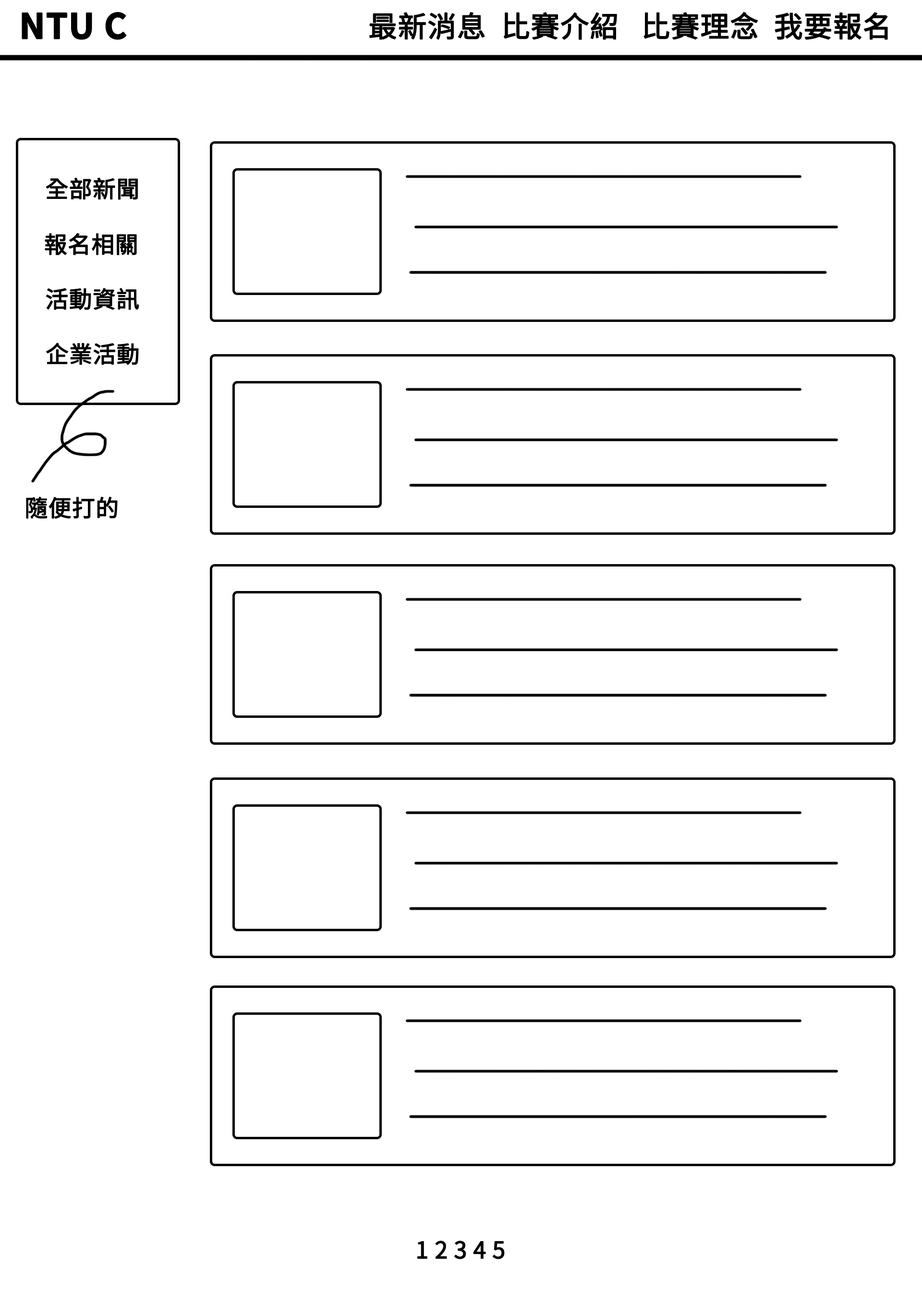
<style>
.page{position:relative;width:922px;height:1293px;background:#ffffff}
.page>*{position:absolute;margin:0}
.t1{font:34.6px "NotoSansCJKtc-Bold";color:#000000;font-weight:bold}
.t2{font:28.8px "NotoSansCJKtc-Regular";color:#000000;font-weight:bold}
.t3{font:23.1px "NotoSansCJKtc-Regular";color:#000000;font-weight:bold}
</style>
<div class="page">
<p class="t1" style="left:22px;top:12px;width:105px;height:28px">NTU C</p>
<p class="t2" style="left:369px;top:12px;width:519px;height:28px">最新消息  比賽介紹   比賽理念  我要報名</p>
<p class="t3" style="left:46px;top:177px;width:92px;height:23px">全部新聞</p>
<p class="t3" style="left:45px;top:233px;width:92px;height:23px">報名相關</p>
<p class="t3" style="left:46px;top:288px;width:93px;height:22px">活動資訊</p>
<p class="t3" style="left:46px;top:343px;width:93px;height:22px">企業活動</p>
<p class="t3" style="left:26px;top:496px;width:92px;height:23px">隨便打的</p>
<p class="t3" style="left:417px;top:1240px;width:88px;height:19px">1 2 3 4 5</p>
</div>
